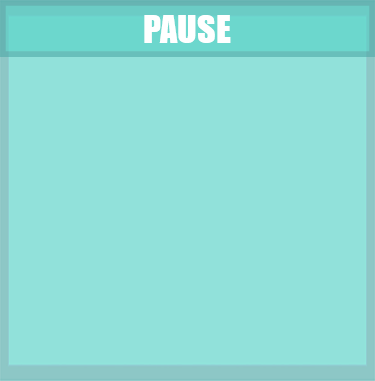
<style>
.page{position:relative;width:375px;height:381px;background:#91e1da}
.page>*{position:absolute;margin:0}
.t1{font:36px "Impact";color:#ffffff}
</style>
<div class="page">
<p class="t1" style="left:144px;top:15px;width:87px;height:28px">PAUSE</p>
</div>
